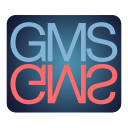
<style>
.page{position:relative;width:128px;height:128px;background:#ffffff}
.page>*{position:absolute;margin:0}
.t1{font:53.4px "HelveticaNeue";letter-spacing:-0.1em;color:#83b4d8}
.t2{font:54.1px "HelveticaNeue";letter-spacing:-0.1em;color:#ff6b6b}
</style>
<div class="page">
<p class="t1" style="left:10px;top:22px;width:108px;height:40px">GMS</p>
<p class="t2" style="left:10px;top:64px;width:108px;height:41px">GMS</p>
</div>
